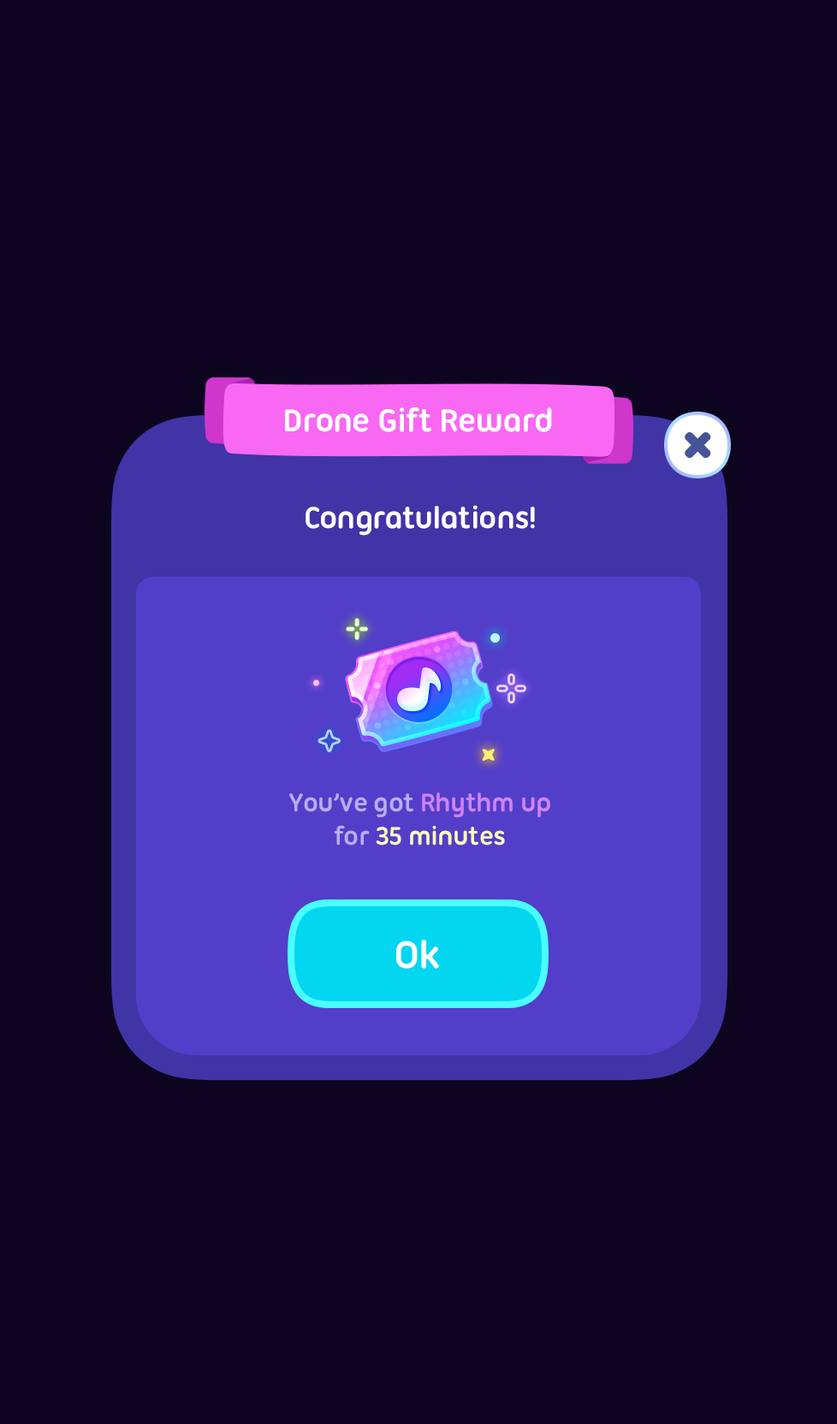
<style>
.page{position:relative;width:837px;height:1424px;background:#0d0420}
.page>*{position:absolute;margin:0}
.t1{font:34.2px "UbuntuTitling-Bold";letter-spacing:-0.025em;color:#ffffff}
.t2{font:32.5px "UbuntuTitling-Bold";letter-spacing:-0.025em;color:#ffffff}
.t3{font:27.4px "UbuntuTitling-Bold";letter-spacing:-0.025em;color:#bbabf4}
.t4{font:27.4px "UbuntuTitling-Bold";letter-spacing:-0.025em;color:#d182ff}
.t5{font:27.4px "UbuntuTitling-Bold";letter-spacing:-0.025em;color:#fefbb7}
.t6{font:41.1px "UbuntuTitling-Bold";letter-spacing:-0.025em;color:#ffffff}
</style>
<div class="page">
<p class="t1" style="left:285px;top:407px;width:267px;height:25px">Drone Gift Reward</p>
<p class="t2" style="left:306px;top:505px;width:229px;height:31px">Congratulations!</p>
<p class="t3" style="left:289px;top:793px;width:261px;height:53px;text-align:center">You’ve got <span class="t4">Rhythm up<br></span>for <span class="t5">35 minutes</span></p>
<p class="t6" style="left:396px;top:940px;width:43px;height:29px">Ok</p>
</div>
